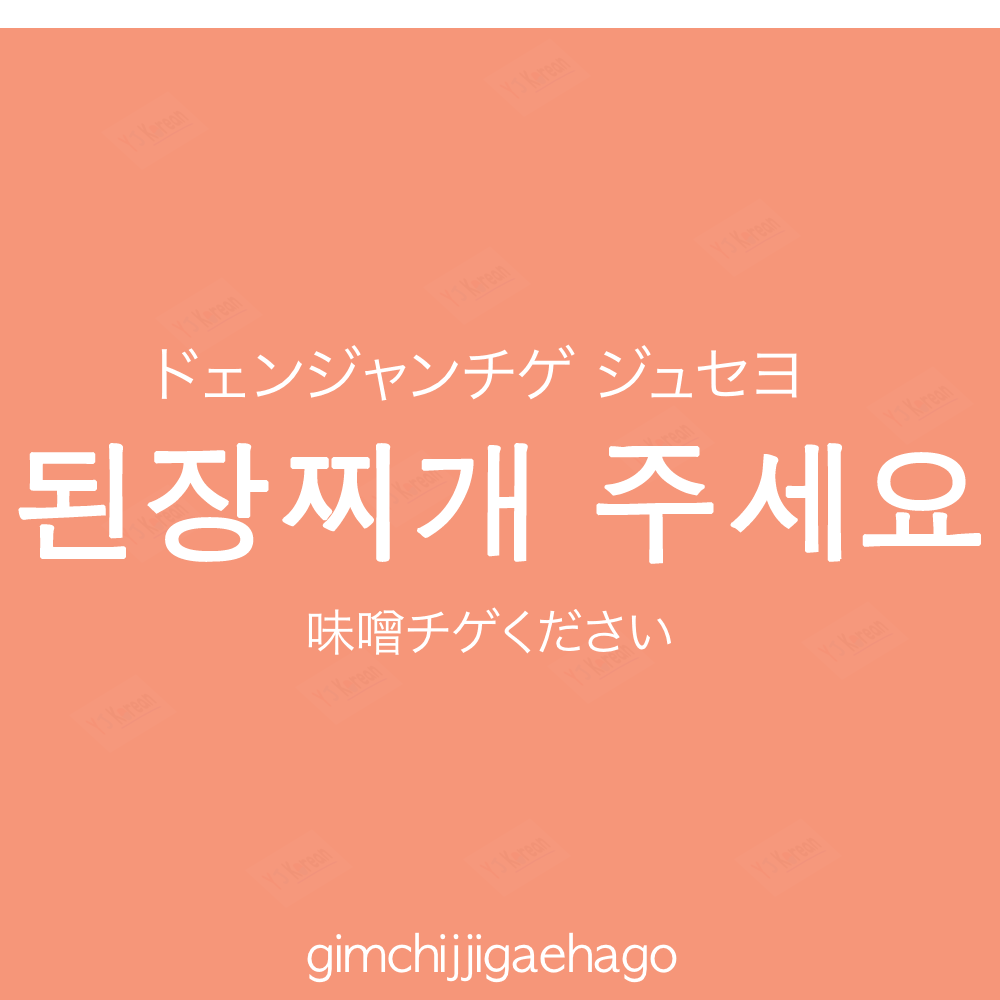
<style>
.page{position:relative;width:1000px;height:1000px;background:#f69679}
.page>*{position:absolute;margin:0}
.t1{font:60px "HiraKakuProN-W3";color:#ffffff;text-transform:uppercase}
.t2{font:130px "AppleGothic";color:#ffffff;font-weight:bold}
.t3{font:50px "HiraKakuProN-W3";color:#ffffff}
.t4{font:50px "AppleGothic";color:#ffffff}
</style>
<div class="page">
<p class="t1" style="left:161px;top:344px;width:636px;height:57px">ドェンジャンチゲ ジュセヨ</p>
<p class="t2" style="left:18px;top:443px;width:963px;height:121px">된장찌개 주세요</p>
<p class="t3" style="left:308px;top:607px;width:363px;height:48px">味噌チゲください</p>
<p class="t4" style="left:307px;top:932px;width:370px;height:51px">gimchijjigaehago</p>
</div>
